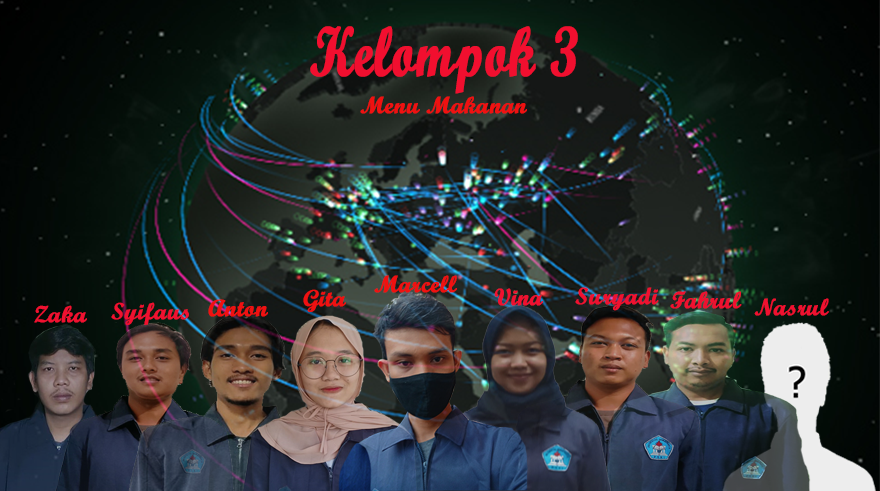
<style>
.page{position:relative;width:880px;height:491px}
.page>*{position:absolute;margin:0}
.t1{font:70.1px "ScriptMTBold";color:#f10f2f;font-weight:bold;scale:0.74 1}
.t2{font:23.6px "ScriptMTBold";color:#f01111;font-weight:bold}
.t3{font:23.4px "ScriptMTBold";color:#f01111;font-weight:bold}
.t4{font:23.6px "ScriptMTBold";color:#f01130;font-weight:bold}
.t5{font:23.4px "ScriptMTBold";color:#f01130;font-weight:bold}
</style>
<div class="page">
<p class="t1" style="left:310px;top:26px;width:268px;height:68px">Kelompok 3</p>
<p class="t2" style="left:360px;top:96px;width:167px;height:18px">Menu Makanan</p>
<p class="t2" style="left:374px;top:275px;width:83px;height:18px">Marcell</p>
<p class="t3" style="left:303px;top:289px;width:43px;height:23px">Gita</p>
<p class="t4" style="left:494px;top:288px;width:49px;height:18px">Vina</p>
<p class="t4" style="left:575px;top:287px;width:84px;height:24px">Suryadi</p>
<p class="t4" style="left:670px;top:291px;width:72px;height:18px">Fahrul</p>
<p class="t5" style="left:34px;top:305px;width:53px;height:18px">Zaka</p>
<p class="t5" style="left:111px;top:302px;width:78px;height:23px">Syifaus</p>
<p class="t2" style="left:208px;top:299px;width:60px;height:18px">Anton</p>
<p class="t4" style="left:754px;top:298px;width:75px;height:18px">Nasrul</p>
</div>
